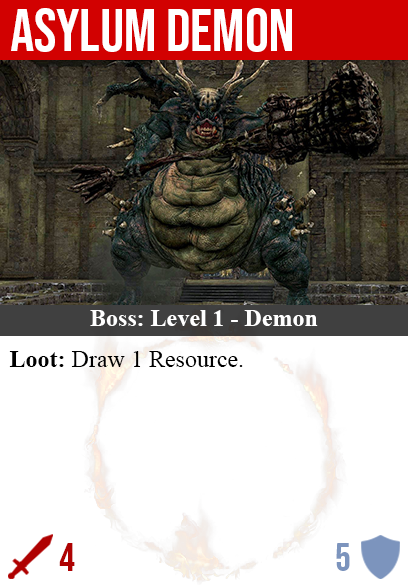
<style>
.page{position:relative;width:408px;height:585px;background:#ffffff}
.page>*{position:absolute;margin:0}
.t1{font:60px "BebasNeue-Regular";color:#ffffff}
.t2{font:24px "TimesNewRomanPS-BoldMT";color:#ffffff}
.t3{font:24px "TimesNewRomanPSMT";color:#000000}
.t4{font:24px "TimesNewRomanPS-BoldMT";color:#000000}
.t5{font:40px "BebasNeue-Regular";color:#af0202}
.t6{font:40px "BebasNeue-Regular";color:#7c94bd}
</style>
<div class="page">
<p class="t1" style="left:11px;top:8px;width:281px;height:44px">asylum demon</p>
<p class="t2" style="left:90px;top:310px;width:228px;height:16px">Boss: Level 1 - Demon</p>
<p class="t3" style="left:9px;top:351px;width:234px;height:16px"><span class="t4">Loot:</span> Draw 1 Resource.</p>
<p class="t5" style="left:59px;top:543px;width:16px;height:28px">4</p>
<p class="t6" style="left:336px;top:543px;width:14px;height:28px">5</p>
</div>
